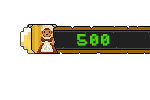
<style>
.page{position:relative;width:150px;height:100px;background:#ffffff}
.page>*{position:absolute;margin:0}
.t1{font:15.1px "Minecraft";letter-spacing:0.135em;color:#45d900;font-weight:bold}
</style>
<div class="page">
<p class="t1" style="left:77px;top:34px;width:33px;height:12px">500</p>
</div>
